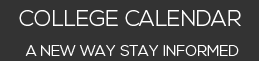
<style>
.page{position:relative;width:259px;height:61px;background:#333333}
.page>*{position:absolute;margin:0}
.t1{font:22px "NexaLight";color:#ffffff;text-transform:uppercase}
.t2{font:15px "NexaLight";color:#ffffff;text-transform:uppercase}
</style>
<div class="page">
<p class="t1" style="left:19px;top:10px;width:222px;height:16px">College Calendar</p>
<p class="t2" style="left:25px;top:45px;width:214px;height:11px">A new way stay informed</p>
</div>
